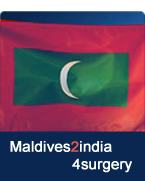
<style>
.page{position:relative;width:145px;height:181px;background:#092750}
.page>*{position:absolute;margin:0}
.t1{font:14.7px "ArialMT";color:#ffffff;font-weight:bold}
.t2{font:14.7px "ArialMT";color:#e75851;font-weight:bold}
.t3{font:14.7px "ArialMT";color:#fefefd;font-weight:bold}
</style>
<div class="page">
<p class="t1" style="left:10px;top:141px;width:122px;height:32px">Maldives<span class="t2">2</span>india<br>              <span class="t3">4</span>surgery</p>
</div>
